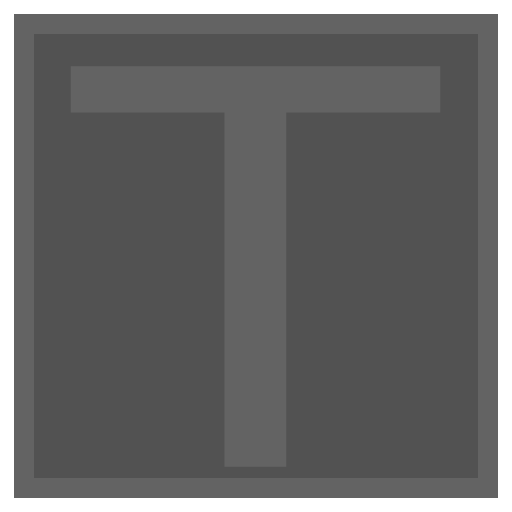
<style>
.page{position:relative;width:512px;height:512px;background:#525252}
.page>*{position:absolute;margin:0}
.t1{font:638.8px "LucidaConsole";color:#636363}
</style>
<div class="page">
<p class="t1" style="left:70px;top:66px;width:371px;height:401px">T</p>
</div>
